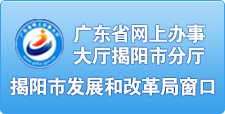
<style>
.page{position:relative;width:225px;height:114px}
.page>*{position:absolute;margin:0}
.t1{font:20px/22px "FZDHTJW--GB1-0";letter-spacing:-0.06em;color:#ffffff}
.t2{font:20px "FZDHTJW--GB1-0";letter-spacing:-0.06em;color:#ffffff}
.t3{font:14px "FZDHTJW--GB1-0";letter-spacing:-0.04em;color:#ffffff}
</style>
<div class="page">
<p class="t1" style="left:73px;top:24px;width:132px;height:41px;text-align:center">广东省网上办事<br>大厅揭阳市分厅</p>
<p class="t2" style="left:10px;top:77px;width:205px;height:19px"><span class="t3"><br></span>揭阳市发展和改革局窗口</p>
</div>
